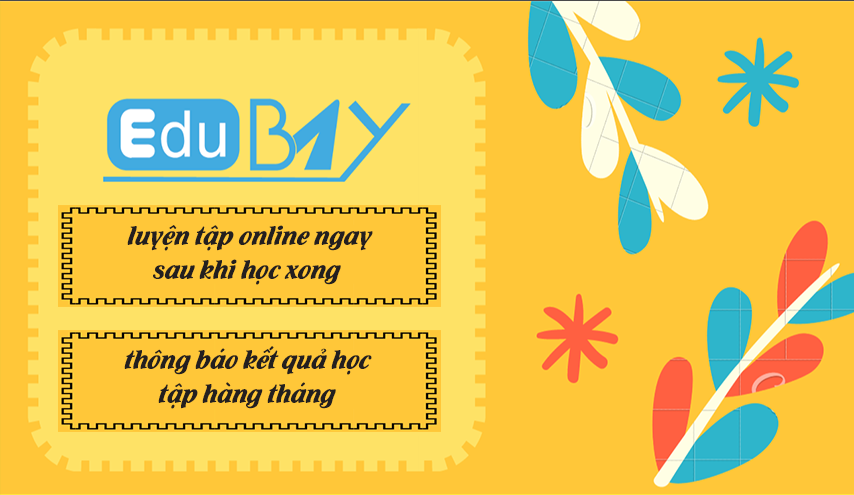
<style>
.page{position:relative;width:854px;height:495px;background:#ffc739}
.page>*{position:absolute;margin:0}
.t1{font:28.3px "UTM-Flamenco";color:#231f20}
</style>
<div class="page">
<p class="t1" style="left:127px;top:225px;width:246px;height:60px;text-align:center">luyện tập online ngay sau khi học xong</p>
<p class="t1" style="left:124px;top:346px;width:248px;height:63px;text-align:center">thông báo kết quả học tập hàng tháng</p>
</div>
